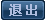
<style>
.page{position:relative;width:46px;height:20px}
.page>*{position:absolute;margin:0}
.t1{font:14px "SimHei";letter-spacing:0.06em;color:#afbee0;font-weight:bold}
</style>
<div class="page">
<p class="t1" style="left:9px;top:4px;width:28px;height:12px">退出</p>
</div>
